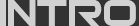
<style>
.page{position:relative;width:139px;height:26px;background:#d1d1d1}
.page>*{position:absolute;margin:0}
.t1{font:50px "Bitsumishi";color:#d1d1d1}
</style>
<div class="page">
<p class="t1" style="left:0px;top:0px;width:136px;height:26px">intro</p>
</div>
